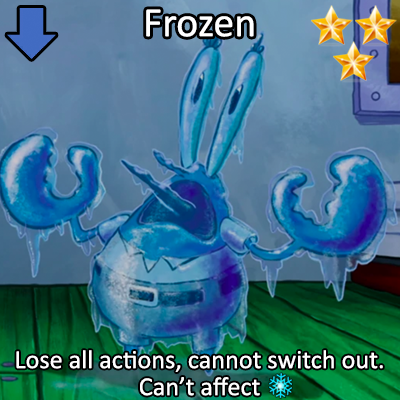
<style>
.page{position:relative;width:400px;height:400px}
.page>*{position:absolute;margin:0}
.t1{font:72px "Calibri";color:#ffffff}
.t2{font:45px/27px "Calibri";color:#ffffff}
</style>
<div class="page">
<p class="t1" style="left:146px;top:9px;width:108px;height:28px">Frozen</p>
<p class="t2" style="left:16px;top:350px;width:367px;height:46px;text-align:center">Lose all actions, cannot switch out.<br>Can’t affect</p>
</div>
